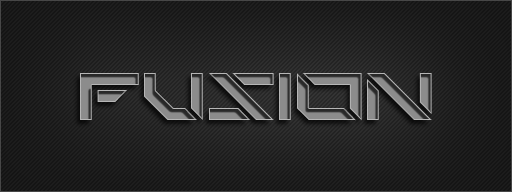
<style>
.page{position:relative;width:512px;height:192px}
.page>*{position:absolute;margin:0}
.t1{font:94.3px "TechnoHideo";text-transform:uppercase}
</style>
<div class="page">
<p class="t1" style="left:80px;top:73px;width:352px;height:48px">FusiON</p>
</div>
